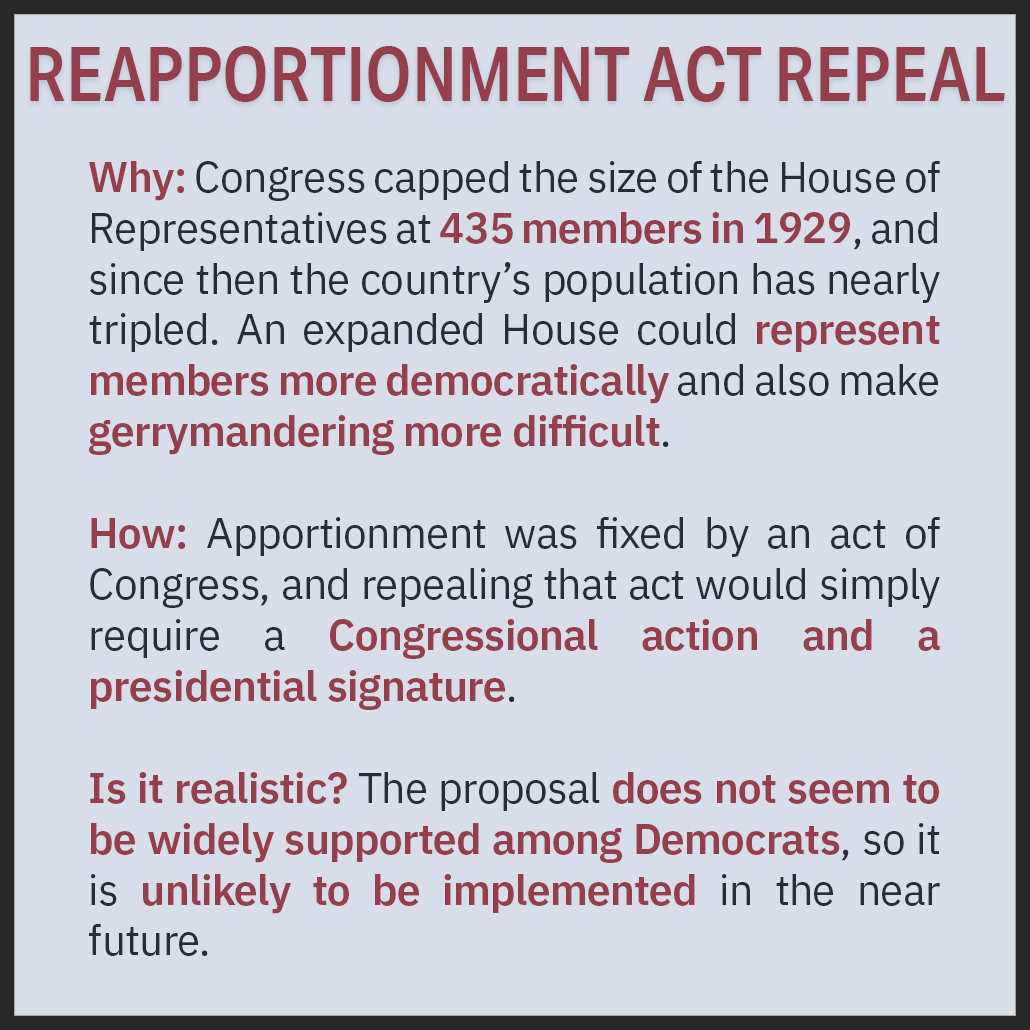
<style>
.page{position:relative;width:1030px;height:1030px;background:#d8dee9}
.page>*{position:absolute;margin:0}
.t1{font:75.8px "AktivGroteskCd-Medium";color:#953f4d}
.t2{font:42.4px "IBMPlexSans";letter-spacing:-0.015em;color:#252d38}
.t3{font:42.4px "IBMPlexSans-SemiBold";letter-spacing:-0.015em;color:#953f4d}
</style>
<div class="page">
<p class="t1" style="left:30px;top:46px;width:975px;height:56px">REAPPORTIONMENT ACT REPEAL</p>
<p class="t2" style="left:89px;top:161px;width:851px;height:795px;text-align:justify"><span class="t3">Why:</span> Congress capped the size of the House of Representatives at <span class="t3">435 members in 1929</span>, and since then the country’s population has nearly tripled. An expanded House could <span class="t3">represent members more democratically</span> and also make <span class="t3">gerrymandering more difficult</span>.<br><br><span class="t3">How:</span> Apportionment was fixed by an act of Congress, and repealing that act would simply require a <span class="t3">Congressional action and a presidential signature</span>.<br><br><span class="t3">Is it realistic?</span> The proposal <span class="t3">does not seem to be widely supported among Democrats</span>, so it is <span class="t3">unlikely to be implemented</span> in the near future.</p>
</div>
